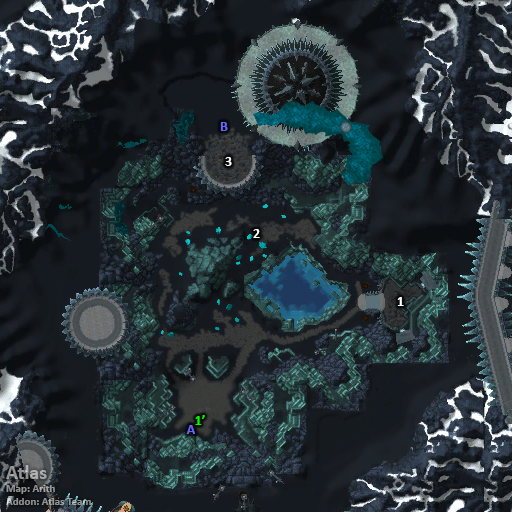
<style>
.page{position:relative;width:512px;height:512px}
.page>*{position:absolute;margin:0}
.t1{font:14px "Calibri-Bold";color:#6666ff}
.t2{font:14px "Calibri-Bold";color:#ffffff}
.t3{font:14px "Calibri-Bold";color:#00ff00}
.t4{font:11px "Calibri-Bold";color:#929394}
.t5{font:20px "Calibri-Bold";color:#929394}
</style>
<div class="page">
<p class="t1" style="left:220px;top:122px;width:8px;height:9px">B</p>
<p class="t2" style="left:225px;top:157px;width:7px;height:9px">3</p>
<p class="t2" style="left:253px;top:229px;width:7px;height:9px">2</p>
<p class="t2" style="left:397px;top:297px;width:7px;height:9px">1</p>
<p class="t1" style="left:186px;top:425px;width:9px;height:9px">A</p>
<p class="t3" style="left:195px;top:415px;width:10px;height:10px">1’</p>
<p class="t4" style="left:6px;top:465px;width:85px;height:40px"><span class="t5">Atlas<br></span>Map: Arith<br>Addon: Atlas Team</p>
</div>
